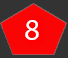
<style>
.page{position:relative;width:68px;height:58px;background:#fa0505}
.page>*{position:absolute;margin:0}
.t1{font:30px "MyriadPro-Regular";color:#ffffff}
</style>
<div class="page">
<p class="t1" style="left:25px;top:20px;width:14px;height:20px">8</p>
</div>
